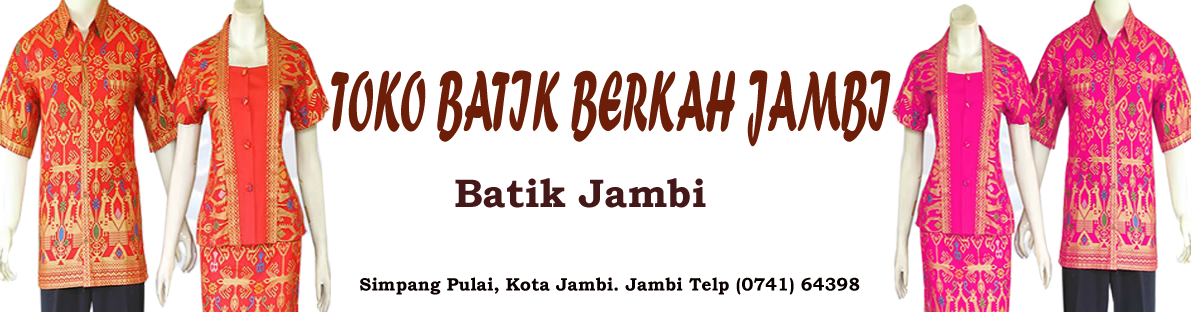
<style>
.page{position:relative;width:1191px;height:312px;background:#ffffff}
.page>*{position:absolute;margin:0}
.t1{font:89.4px "ForteMT";color:#6c1e08;scale:0.45 1}
.t2{font:40px "BookmanOldStyle-Bold";color:#431717}
.t3{font:18px "BookmanOldStyle-Bold";color:#0a0000}
</style>
<div class="page">
<p class="t1" style="left:331px;top:70px;width:560px;height:77px">TOKO BATIK BERKAH JAMBI</p>
<p class="t2" style="left:455px;top:178px;width:251px;height:30px">Batik Jambi</p>
<p class="t3" style="left:360px;top:277px;width:500px;height:18px">Simpang Pulai, Kota Jambi. Jambi Telp (0741) 64398</p>
</div>
